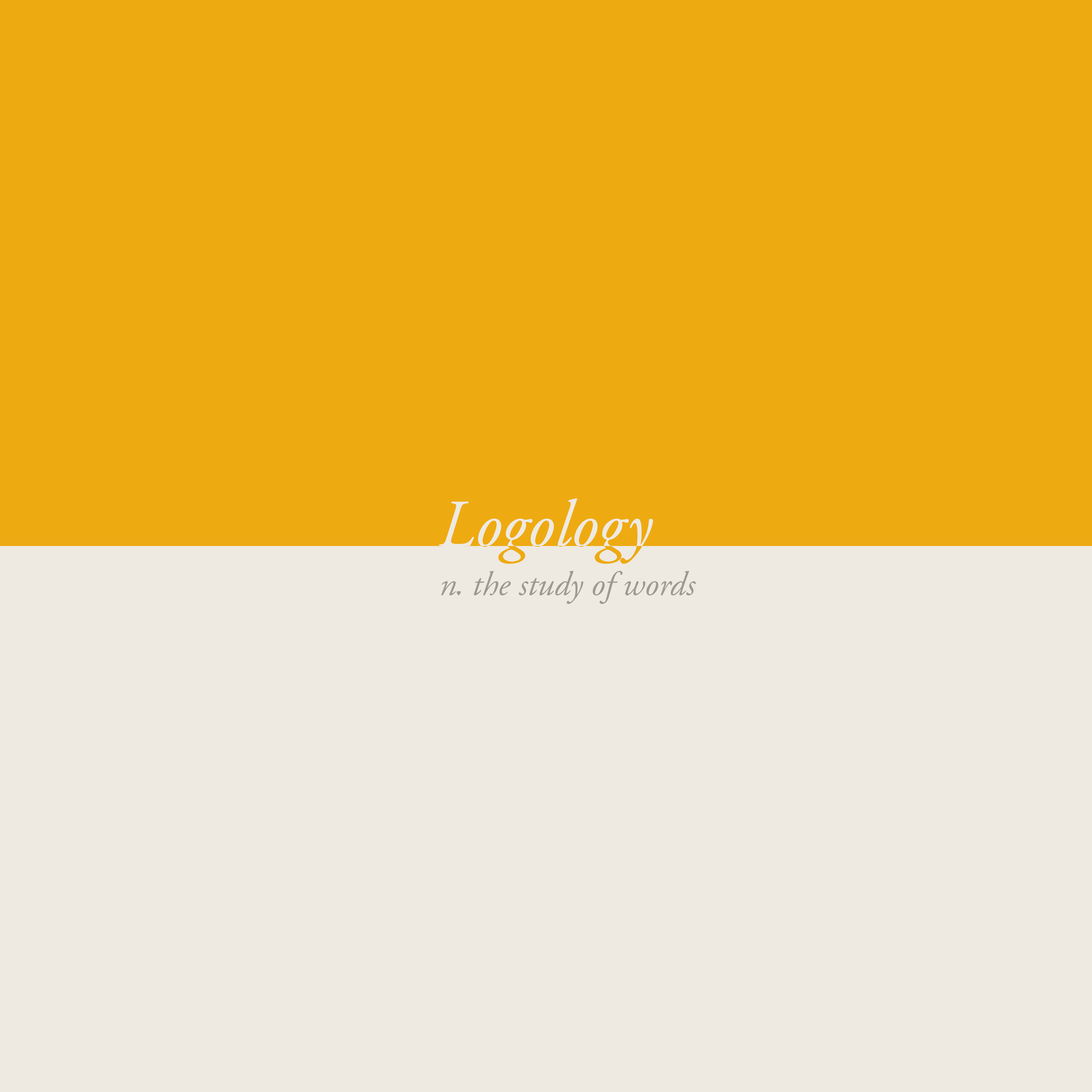
<style>
.page{position:relative;width:1092px;height:1092px;background:#eeeae1}
.page>*{position:absolute;margin:0}
.t1{font:66.8px "AGaramondPro-Italic";color:#eeeae1}
.t2{font:34.1px "AGaramondPro-Italic";color:#9e9a91}
.t3{font:4.9px "AdobeGothicStd-Bold";color:#9e9a91}
</style>
<div class="page">
<p class="t1" style="left:439px;top:498px;width:214px;height:66px">Logology</p>
<p class="t1" style="left:439px;top:498px;width:214px;height:66px">Logology</p>
<p class="t2" style="left:441px;top:571px;width:255px;height:33px">n  the study of words</p>
<p class="t3" style="left:456px;top:591px;width:5px;height:4px">♥︎</p>
</div>
